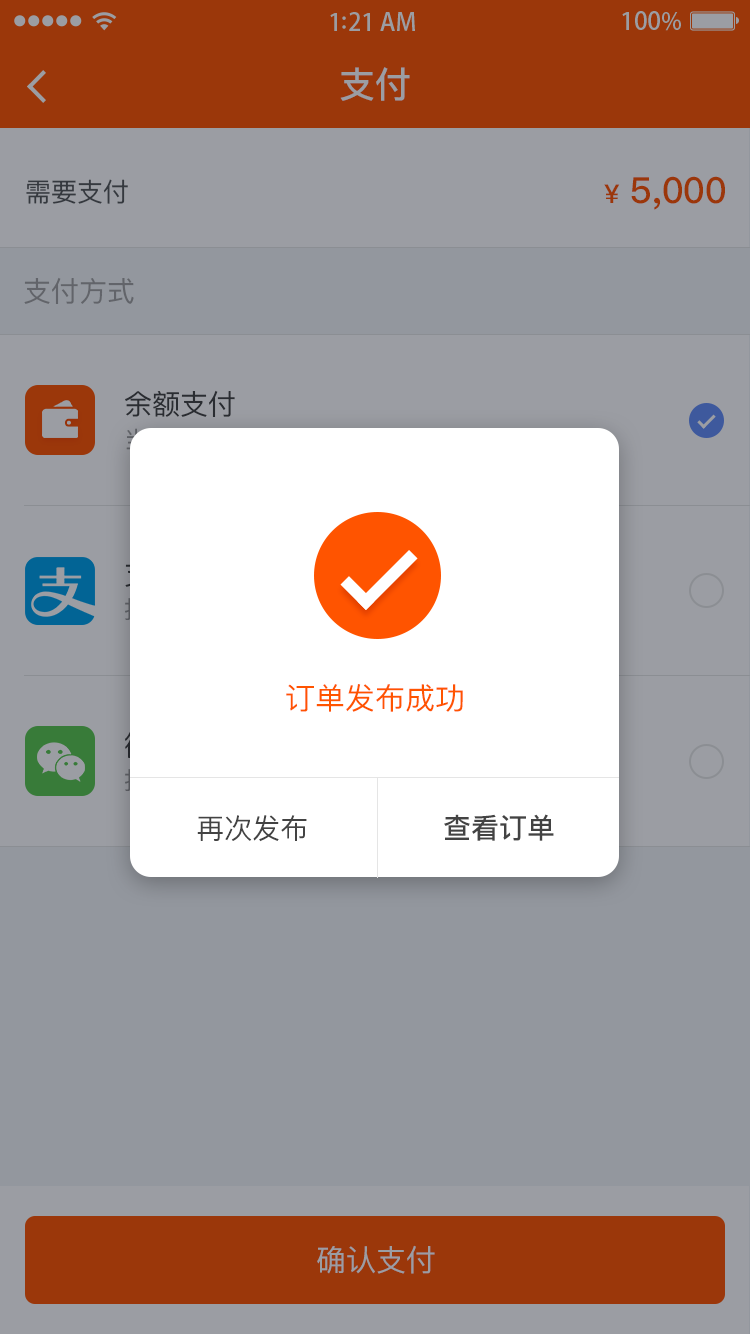
<style>
.page{position:relative;width:750px;height:1334px;background:#93979e}
.page>*{position:absolute;margin:0}
.t1{font:36px "PingFangSC-Medium";color:#9b9da3}
.t2{font:26px "PingFangSC-Regular";color:#35393f}
.t3{font:36px "PingFangSC-Medium";color:#9b370a}
.t4{font:26px "PingFangSC-Medium";color:#9b370a}
.t5{font:28px "PingFangSC-Regular";color:#62646a}
.t6{font:28px "PingFangSC-Regular";color:#2a2d32}
.t7{font:30px "PingFangSC-Regular";color:#ff5400}
.t8{font:28px "PingFangSC-Regular";color:#434343}
.t9{font:28px "PingFangSC-Medium";color:#434343}
.t10{font:30px "PingFangSC-Regular";color:#9b9da3;text-transform:uppercase}
</style>
<div class="page">
<p class="t1" style="left:340px;top:67px;width:70px;height:34px">支付</p>
<p class="t2" style="left:26px;top:179px;width:102px;height:25px">需要支付</p>
<p class="t3" style="left:604px;top:176px;width:121px;height:34px"><span class="t4">¥ </span>5,000</p>
<p class="t5" style="left:24px;top:277px;width:110px;height:27px">支付方式</p>
<p class="t6" style="left:125px;top:390px;width:110px;height:27px">余额支付</p>
<p class="t7" style="left:286px;top:684px;width:177px;height:28px">订单发布成功</p>
<p class="t8" style="left:197px;top:815px;width:110px;height:27px">再次发布</p>
<p class="t9" style="left:444px;top:814px;width:110px;height:27px">查看订单</p>
<p class="t10" style="left:317px;top:1245px;width:118px;height:29px">确认支付</p>
</div>
